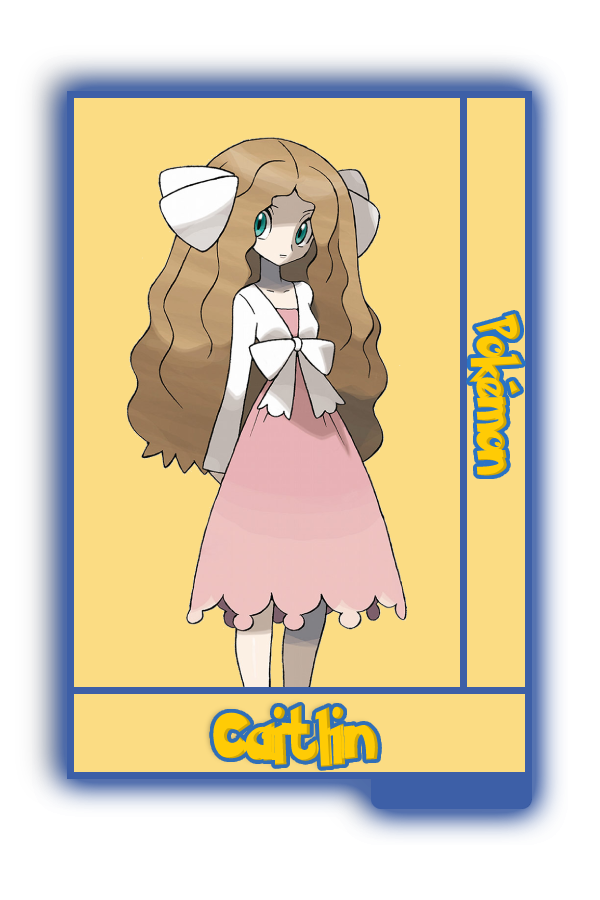
<style>
.page{position:relative;width:600px;height:900px;background:#fbdc83}
.page>*{position:absolute;margin:0}
.t1{font:48.8px "PokemonSolidNormal";color:#ffcb05;scale:0.8 1}
.t2{font:56.6px "PokemonSolidNormal";color:#ffcb05;scale:0.92 1}
</style>
<div class="page">
<p class="t1" style="left:469px;top:313px;width:54px;height:163px;rotate:90deg">Pokémon</p>
<p class="t2" style="left:213px;top:705px;width:165px;height:62px">Caitlin</p>
</div>
